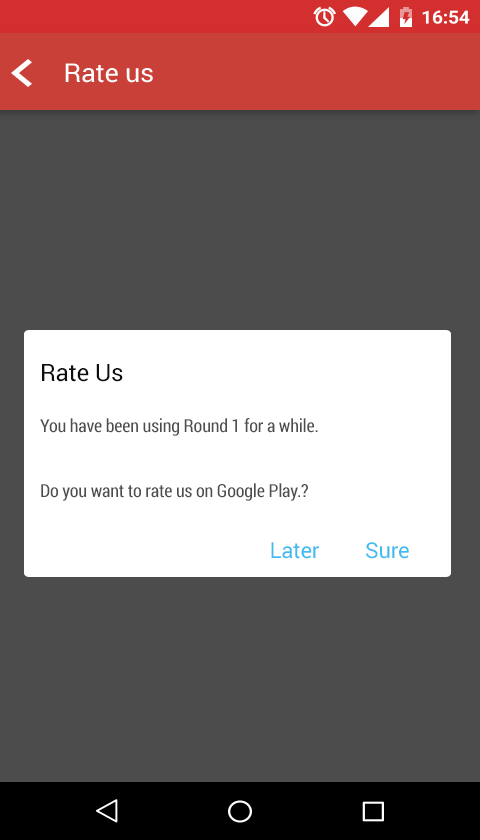
<style>
.page{position:relative;width:480px;height:840px;background:#4c4c4c}
.page>*{position:absolute;margin:0}
.t1{font:26.1px "Roboto-Regular";letter-spacing:-0.01em;color:#ffffff;scale:1.03 1}
.t2{font:24px "Roboto-Regular";letter-spacing:-0.01em;color:#0f0f0f}
.t3{font:18px "RobotoCondensed-Regular";letter-spacing:-0.01em;color:#4d4d4d}
.t4{font:22px "Roboto-Regular";letter-spacing:-0.01em;color:#3fbcef}
</style>
<div class="page">
<p class="t1" style="left:65px;top:63px;width:88px;height:20px">Rate us</p>
<p class="t2" style="left:42px;top:364px;width:81px;height:18px">Rate Us</p>
<p class="t3" style="left:40px;top:418px;width:278px;height:83px">You have been using Round 1 for a while.<br><br><br>Do you want to rate us on Google Play.?</p>
<p class="t4" style="left:271px;top:542px;width:48px;height:17px">Later</p>
<p class="t4" style="left:366px;top:542px;width:43px;height:17px">Sure</p>
</div>
